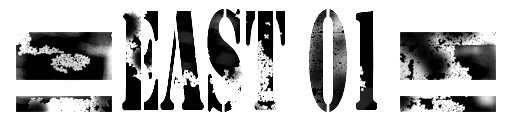
<style>
.page{position:relative;width:512px;height:128px;background:#ffffff}
.page>*{position:absolute;margin:0}
.t1{font:132px "StencilStd";scale:0.47 1}
</style>
<div class="page">
<p class="t1" style="left:122px;top:9px;width:256px;height:104px">EAST 01</p>
</div>
